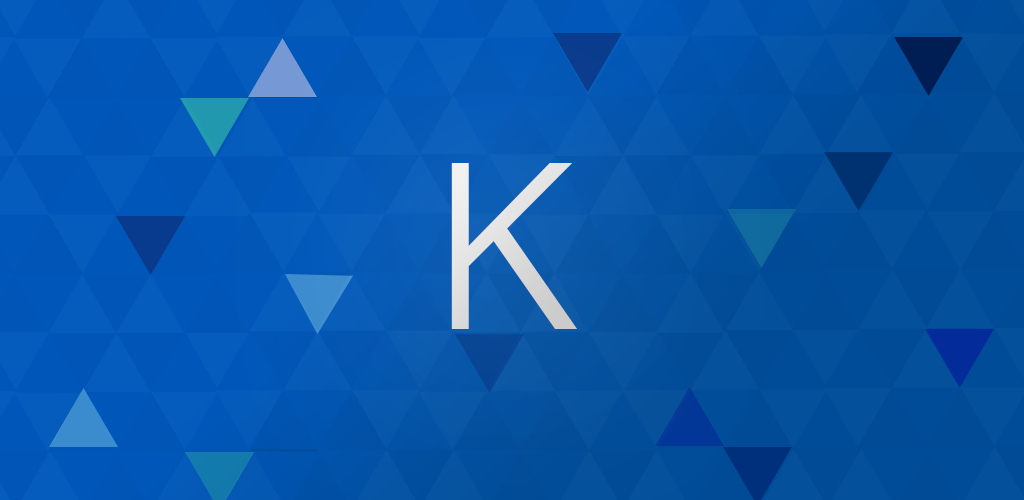
<style>
.page{position:relative;width:1024px;height:500px}
.page>*{position:absolute;margin:0}
.t1{font:211.7px "AppleGothic";color:#eeeeee}
</style>
<div class="page">
<p class="t1" style="left:451px;top:163px;width:126px;height:166px">K</p>
</div>
